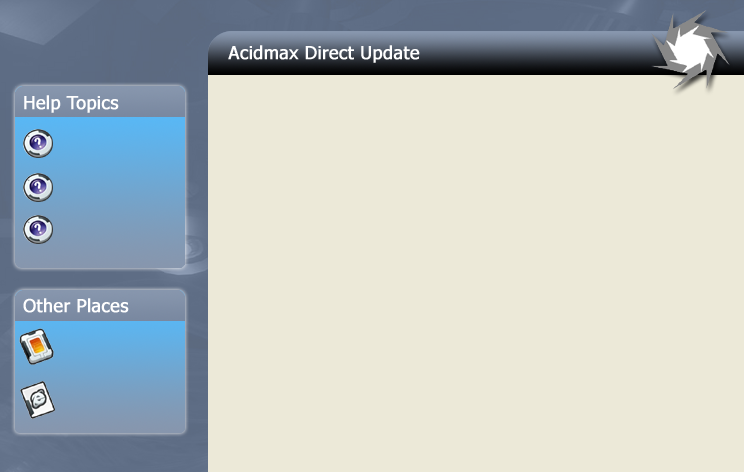
<style>
.page{position:relative;width:744px;height:472px;background:#ece9d8}
.page>*{position:absolute;margin:0}
.t1{font:18px "Tahoma";color:#ffffff;font-weight:bold}
</style>
<div class="page">
<p class="t1" style="left:228px;top:45px;width:192px;height:18px">Acidmax Direct Update</p>
<p class="t1" style="left:24px;top:95px;width:95px;height:18px">Help Topics</p>
<p class="t1" style="left:23px;top:298px;width:106px;height:15px">Other Places</p>
</div>
